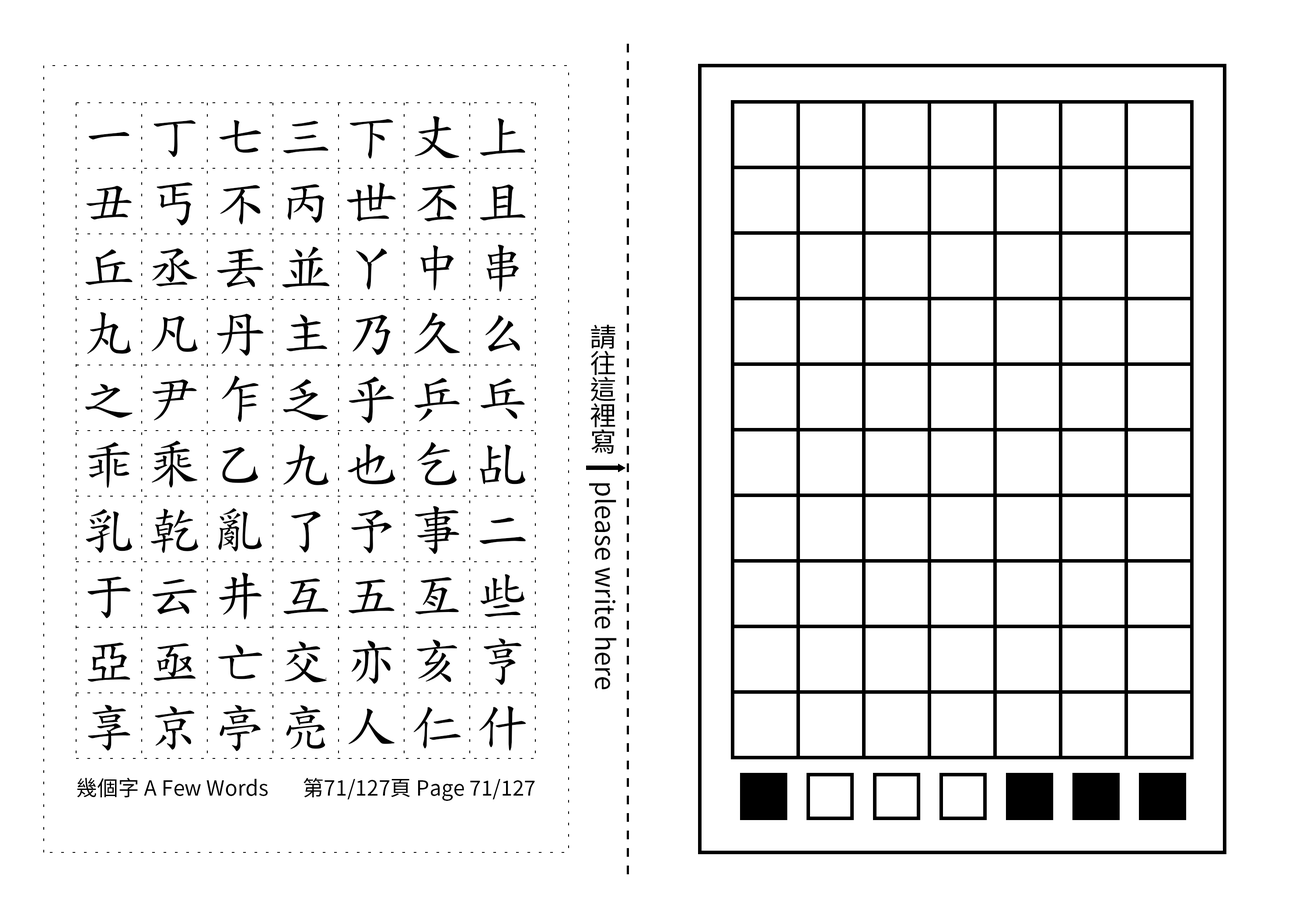
<style>
.page{position:relative;width:1299px;height:918px;background:#ffffff}
.page>*{position:absolute;margin:0}
.t1{font:52.5px/65.6px "TW-Kai-98_1";letter-spacing:0.25em;color:#000000}
.t2{font:26.2px "SourceHanSansTC-Regular";color:#000000}
.t3{font:21px "SourceHanSansTC-Regular";color:#000000}
</style>
<div class="page">
<p class="t1" style="left:85px;top:116px;width:441px;height:636px;text-align:center">一丁七三下丈上丑丐不丙世丕且丘丞丟並丫中串丸凡丹主乃久么之尹乍乏乎乒乓乖乘乙九也乞乩乳乾亂了予事二于云井互五亙些亞亟亡交亦亥亨享京亭亮人仁什</p>
<p class="t2" style="left:589px;top:324px;width:28px;height:366px;text-align:center">請往這裡寫　please write here</p>
<p class="t3" style="left:77px;top:778px;width:191px;height:20px">幾個字 A Few Words</p>
<p class="t3" style="left:303px;top:778px;width:232px;height:23px">第71/127頁 Page 71/127</p>
</div>
